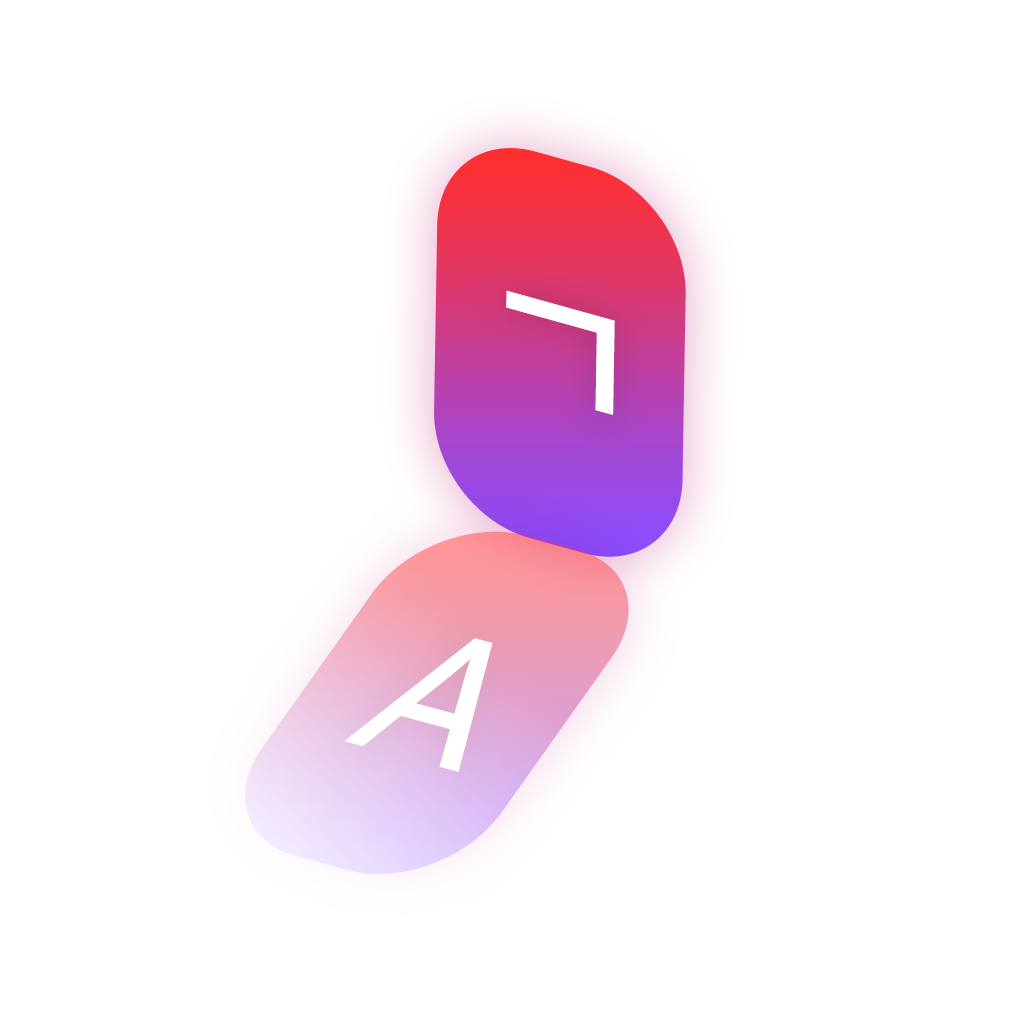
<style>
.page{position:relative;width:1024px;height:1024px;background:#ffffff}
.page>*{position:absolute;margin:0}
.t1{font:193.2px "NanumSquareOTFB";color:#ffffff}
.t2{font:196.7px "NanumSquareOTFB";color:#ffffff;scale:0.95 1}
</style>
<div class="page">
<p class="t1" style="left:506px;top:290px;width:109px;height:125px;rotate:16deg">ㄱ</p>
<p class="t2" style="left:344px;top:638px;width:149px;height:134px;rotate:15deg">A</p>
</div>
